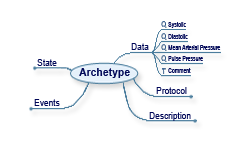
<style>
.page{position:relative;width:250px;height:150px;background:#ffffff}
.page>*{position:absolute;margin:0}
.t1{font:6.9px "ArialNarrow";color:#000757;scale:0.91 1}
.t2{font:9.1px "ArialMT";color:#000757;scale:0.92 1}
.t3{font:11.5px "Arial-BoldMT";color:#000757;scale:0.91 1}
.t4{font:9.2px "ArialMT";color:#000757;scale:0.91 1}
</style>
<div class="page">
<p class="t1" style="left:168px;top:22px;width:18px;height:6px">Systolic</p>
<p class="t1" style="left:168px;top:34px;width:20px;height:5px">Diastolic</p>
<p class="t2" style="left:131px;top:43px;width:18px;height:7px">Data</p>
<p class="t1" style="left:168px;top:45px;width:53px;height:5px">Mean Arterial Pressure</p>
<p class="t2" style="left:37px;top:59px;width:20px;height:7px">State</p>
<p class="t1" style="left:168px;top:56px;width:35px;height:5px">Pulse Pressure</p>
<p class="t3" style="left:79px;top:68px;width:51px;height:10px">Archetype</p>
<p class="t1" style="left:168px;top:68px;width:23px;height:5px">Comment</p>
<p class="t4" style="left:156px;top:87px;width:31px;height:7px">Protocol</p>
<p class="t2" style="left:34px;top:99px;width:26px;height:7px">Events</p>
<p class="t4" style="left:149px;top:112px;width:42px;height:9px">Description</p>
</div>
